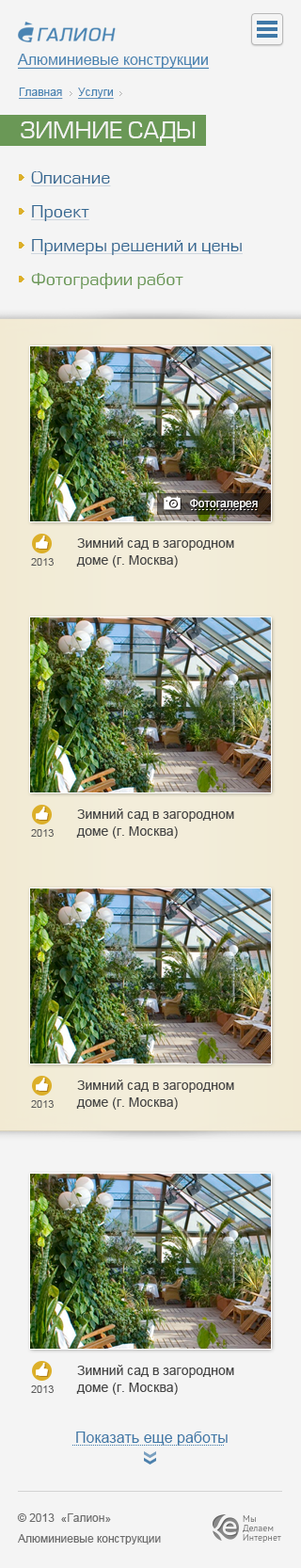
<style>
.page{position:relative;width:301px;height:1568px;background:#f4f4f4}
.page>*{position:absolute;margin:0}
.t1{font:15.1px "ArialMT";color:#4a84b2;text-decoration:underline}
.t2{font:11.3px "ArialMT";color:#4a84b3;text-decoration:underline}
.t3{font:22.6px "EuropeNormal";color:#f4f4f4;text-transform:uppercase}
.t4{font:16.9px/33.9px "EuropeNormal";color:#356892;text-decoration:underline}
.t5{font:16.9px/33.9px "EuropeNormal";color:#6a9856}
.t6{font:11.3px "ArialMT";color:#f4f4f4}
.t7{font:13.2px/16.9px "ArialMT";color:#454545}
.t8{font:10.4px "ArialMT";color:#5c5c5c}
.t9{font:15.1px "ArialMT";color:#3f78a7}
.t10{font:11.3px/20.7px "ArialMT";color:#6d6d6d}
.t11{font:11.3px/13.2px "ArialMT";color:#6d6d6d}
.t12{font:9.4px/9.4px "PTSans-Regular";color:#636363}
</style>
<div class="page">
<p class="t1" style="left:17px;top:54px;width:192px;height:16px">Алюминиевые конструкции</p>
<p class="t2" style="left:19px;top:88px;width:95px;height:12px">Главная     Услуги</p>
<p class="t3" style="left:21px;top:121px;width:175px;height:21px">ЗИМНИЕ САДЫ</p>
<p class="t4" style="left:31px;top:171px;width:212px;height:118px">Описание<br>Проект<br>Примеры решений и цены<br><span class="t5">Фотографии работ</span></p>
<p class="t6" style="left:190px;top:499px;width:68px;height:10px">Фотогалерея</p>
<p class="t7" style="left:76px;top:537px;width:158px;height:31px">Зимний сад в загородном<br>доме (г. Москва)</p>
<p class="t8" style="left:31px;top:558px;width:23px;height:8px">2013</p>
<p class="t7" style="left:76px;top:808px;width:158px;height:31px">Зимний сад в загородном<br>доме (г. Москва)</p>
<p class="t8" style="left:31px;top:829px;width:23px;height:8px">2013</p>
<p class="t7" style="left:76px;top:1080px;width:158px;height:30px">Зимний сад в загородном<br>доме (г. Москва)</p>
<p class="t8" style="left:31px;top:1100px;width:23px;height:8px">2013</p>
<p class="t7" style="left:76px;top:1365px;width:158px;height:30px">Зимний сад в загородном<br>доме (г. Москва)</p>
<p class="t8" style="left:31px;top:1385px;width:23px;height:8px">2013</p>
<p class="t9" style="left:76px;top:1432px;width:152px;height:14px">Показать еще работы</p>
<p class="t10" style="left:17px;top:1513px;width:144px;height:31px">© 2013  «Галион»<br>Алюминиевые <span class="t11">конструкции</span></p>
<p class="t12" style="left:243px;top:1515px;width:38px;height:28px">Мы <br>Делаем<br>Интернет</p>
</div>
